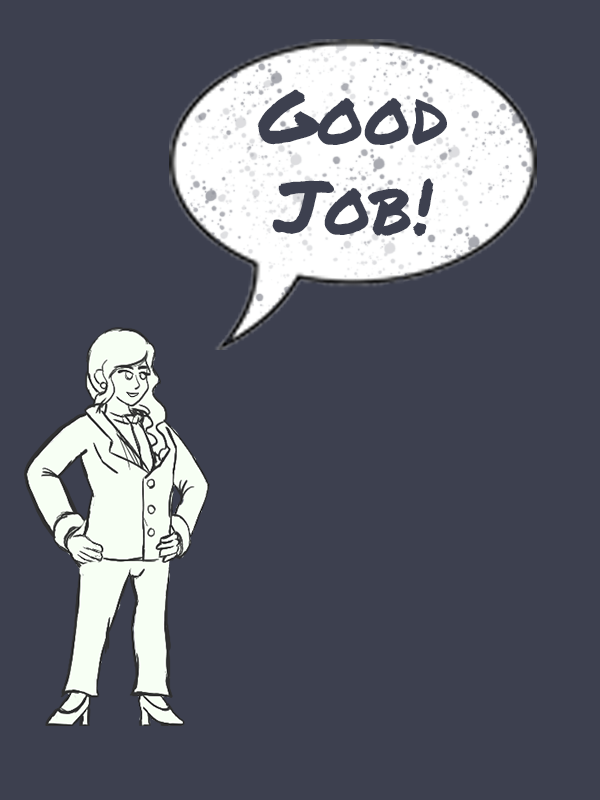
<style>
.page{position:relative;width:600px;height:800px;background:#3d404f}
.page>*{position:absolute;margin:0}
.t1{font:75px "PermanentMarker";color:#3d404f}
</style>
<div class="page">
<p class="t1" style="left:258px;top:89px;width:189px;height:147px;text-align:center">Good<br>Job!</p>
</div>
